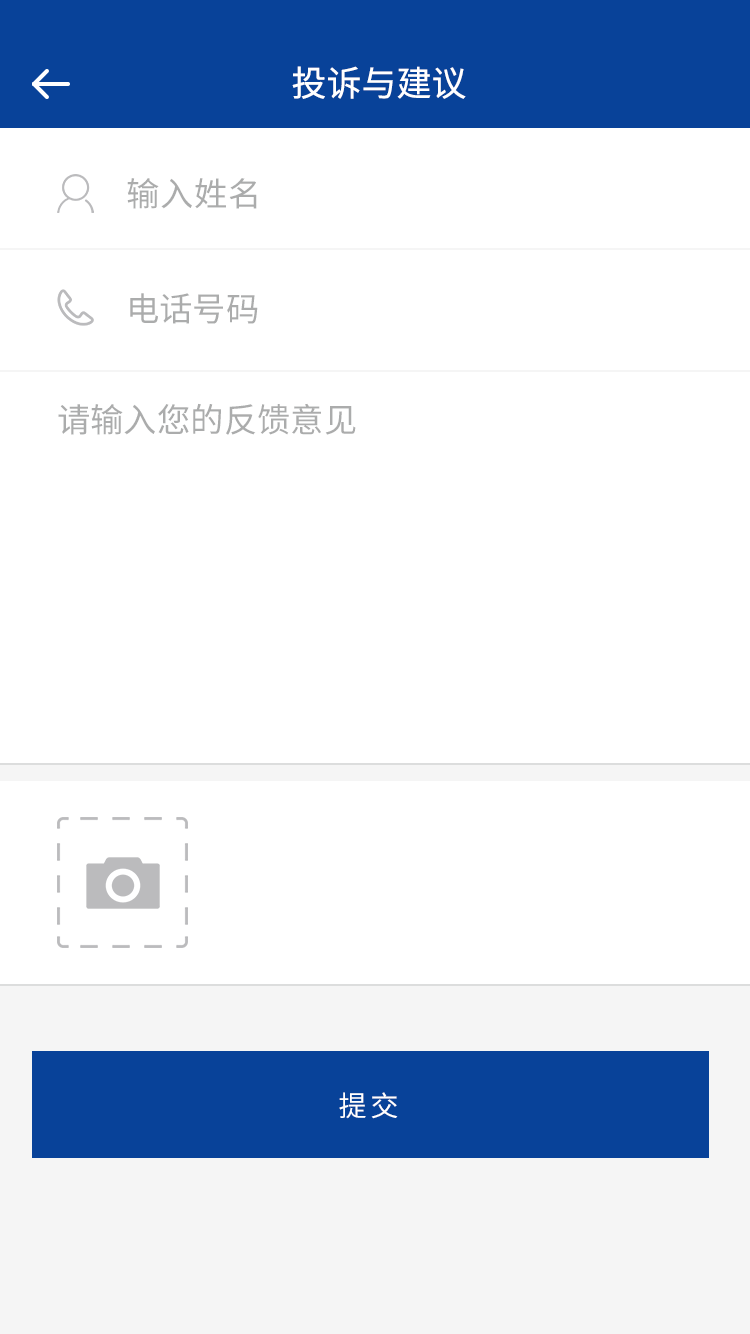
<style>
.page{position:relative;width:750px;height:1334px;background:#ffffff}
.page>*{position:absolute;margin:0}
.t1{font:35px "SourceHanSansCN-Regular";color:#ffffff}
.t2{font:33.3px "SourceHanSansCN-Regular";letter-spacing:0.02em;color:#9fa0a0}
.t3{font:33.3px "SourceHanSansCN-Regular";color:#9fa0a0}
.t4{font:28.1px "SourceHanSansCN-Regular";letter-spacing:0.14em;color:#ffffff}
</style>
<div class="page">
<p class="t1" style="left:292px;top:66px;width:174px;height:33px">投诉与建议</p>
<p class="t2" style="left:127px;top:178px;width:130px;height:31px;opacity:0.89">输入姓名</p>
<p class="t3" style="left:130px;top:293px;width:128px;height:31px;opacity:0.89">电话号码</p>
<p class="t3" style="left:58px;top:403px;width:298px;height:32px;opacity:0.89">请输入您的反馈意见</p>
<p class="t4" style="left:339px;top:1092px;width:59px;height:27px">提交</p>
</div>
